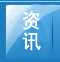
<style>
.page{position:relative;width:60px;height:62px}
.page>*{position:absolute;margin:0}
.t1{font:19px/8px "JQHeiTiJT";letter-spacing:0.1em;color:#ffffff}
</style>
<div class="page">
<p class="t1" style="left:22px;top:11px;width:19px;height:40px">资讯</p>
</div>
